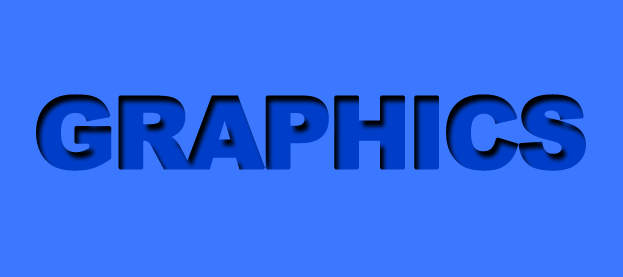
<style>
.page{position:relative;width:623px;height:277px;background:#3c78ff}
.page>*{position:absolute;margin:0}
.t1{font:99.1px "Arial-Black";letter-spacing:-0.06em;color:#003ec9;font-weight:bold}
</style>
<div class="page">
<p class="t1" style="left:36px;top:94px;width:550px;height:77px">GRAPHICS</p>
</div>
